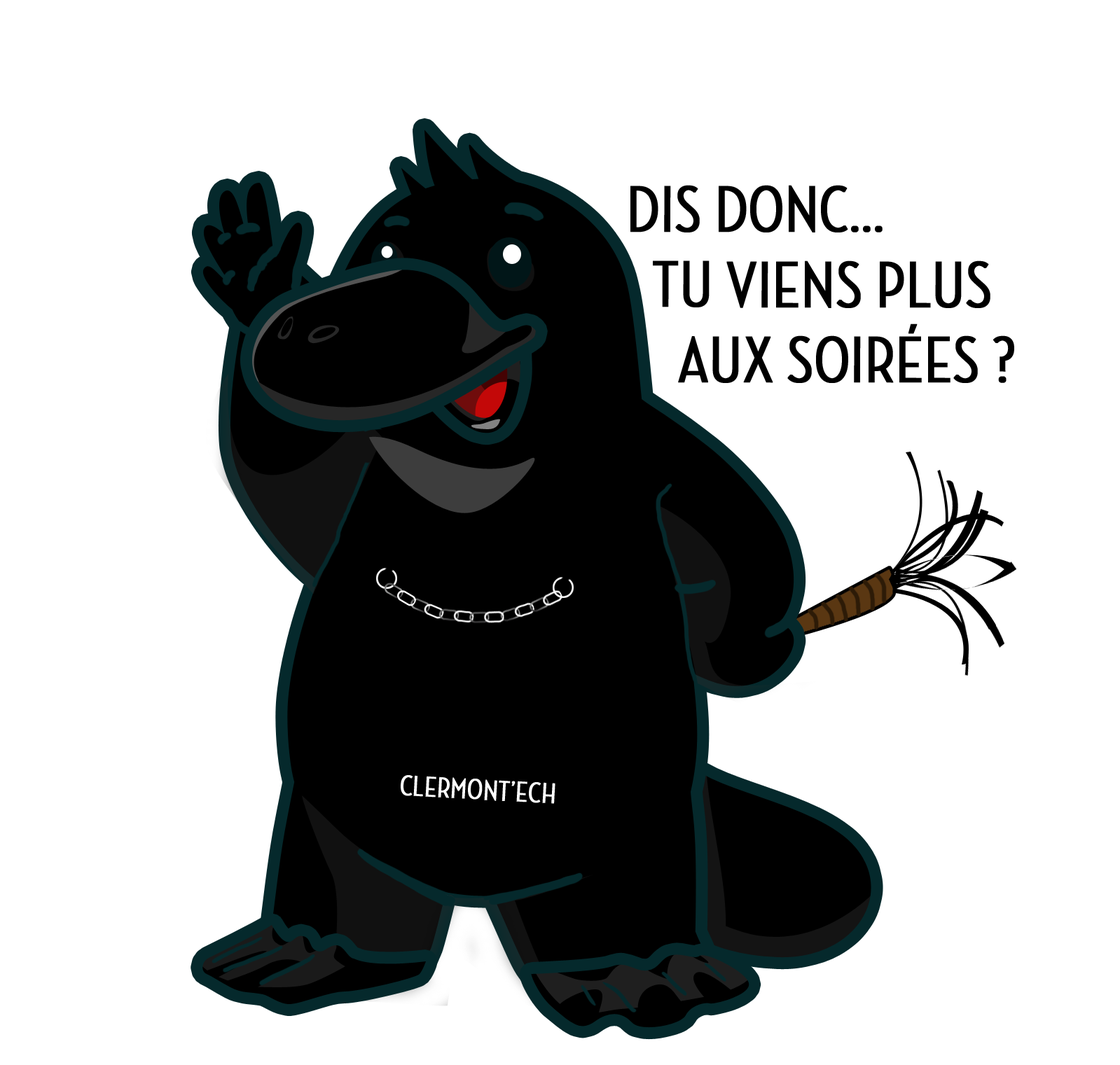
<style>
.page{position:relative;width:1120px;height:1065px;background:#ffffff}
.page>*{position:absolute;margin:0}
.t1{font:66.4px/75.2px "NeutrafaceCondensed-Medium";color:#000000;text-transform:uppercase;font-weight:bold}
.t2{font:29.2px "NeutrafaceCondensed-Medium";color:#ffffff;text-transform:uppercase;font-weight:bold}
</style>
<div class="page">
<p class="t1" style="left:630px;top:185px;width:384px;height:198px">Dis donc... <br>  tu viens plus<br>    aux soirées ?</p>
<p class="t2" style="left:401px;top:775px;width:154px;height:29px;rotate:3deg">Clermont’ech</p>
</div>
